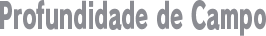
<style>
.page{position:relative;width:266px;height:36px;background:#ffffff}
.page>*{position:absolute;margin:0}
.t1{font:36px "RodinPro-EB";color:#8b8c92;scale:0.59 1}
</style>
<div class="page">
<p class="t1" style="left:0px;top:0px;width:266px;height:36px">Profundidade de Campo</p>
</div>
